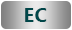
<style>
.page{position:relative;width:72px;height:30px}
.page>*{position:absolute;margin:0}
.t1{font:20px "SegoeUI-Bold";letter-spacing:0.02em;color:#014649}
</style>
<div class="page">
<p class="t1" style="left:25px;top:8px;width:22px;height:14px">EC</p>
</div>
